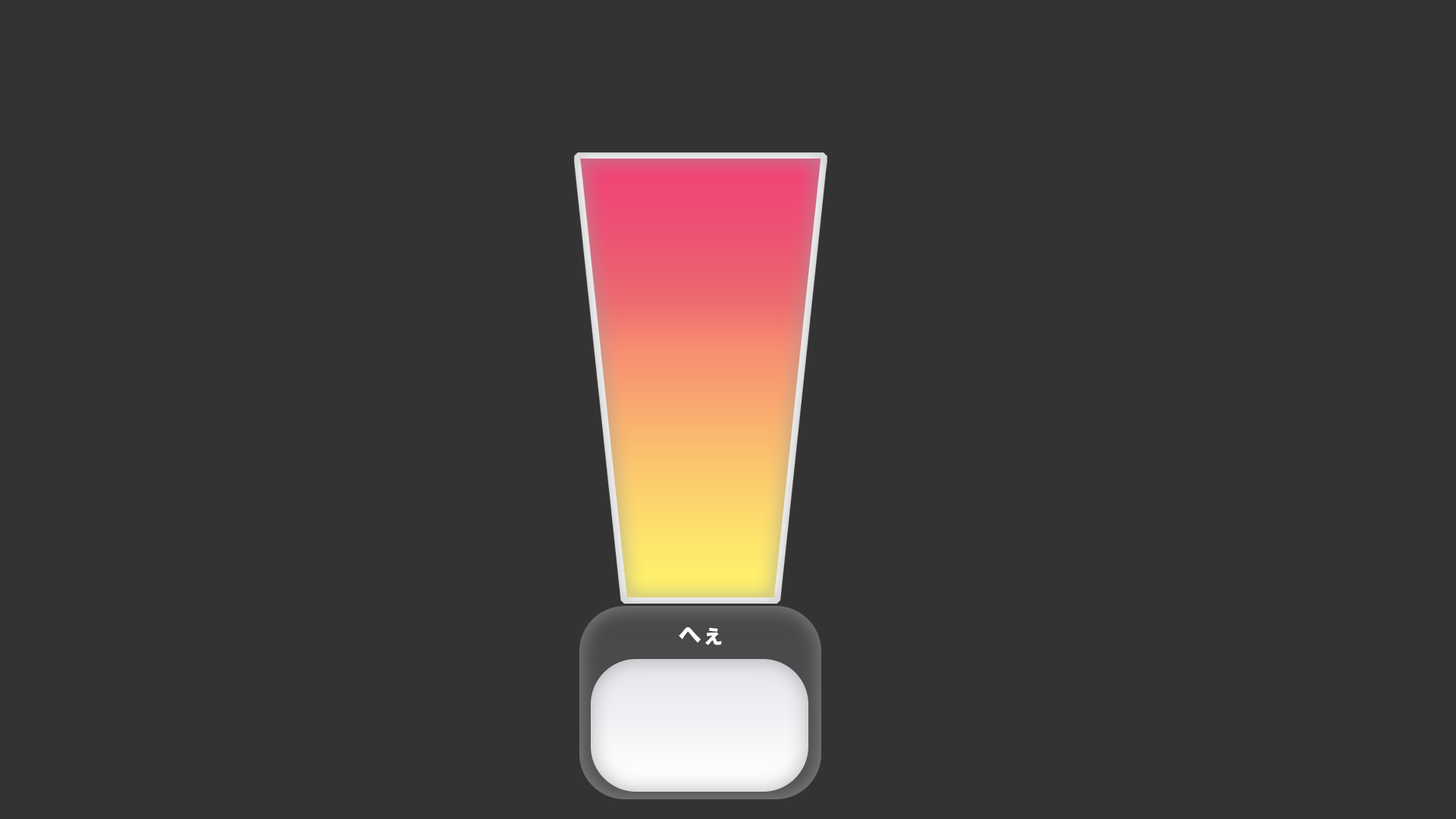
<style>
.page{position:relative;width:1456px;height:819px;background:#333333}
.page>*{position:absolute;margin:0}
.t1{font:22.9px "SourceHanSans-Heavy";color:#ffffff}
</style>
<div class="page">
<p class="t1" style="left:679px;top:627px;width:43px;height:18px">へぇ</p>
</div>
